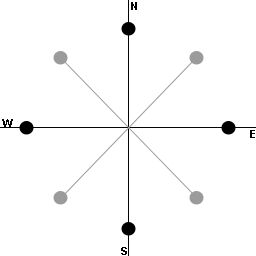
<style>
.page{position:relative;width:256px;height:256px;background:#ffffff}
.page>*{position:absolute;margin:0}
.t1{font:10.7px "Arial-BoldMT";color:#040404}
</style>
<div class="page">
<p class="t1" style="left:131px;top:2px;width:6px;height:8px">N</p>
<p class="t1" style="left:2px;top:119px;width:11px;height:8px">W</p>
<p class="t1" style="left:250px;top:130px;width:5px;height:8px">E</p>
<p class="t1" style="left:121px;top:247px;width:6px;height:8px">S</p>
</div>
